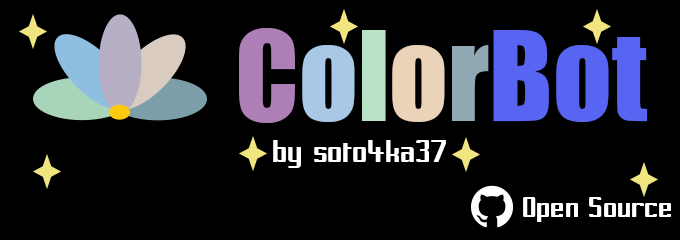
<style>
.page{position:relative;width:680px;height:240px;background:#000000}
.page>*{position:absolute;margin:0}
.t1{font:115.2px "Impact";color:#5865f2}
.t2{font:115.2px "Impact";color:#ae7fb7}
.t3{font:115.2px "Impact";color:#a9c8e8}
.t4{font:115.2px "Impact";color:#b9e3c6}
.t5{font:115.2px "Impact";color:#ead3b8}
.t6{font:115.2px "Impact";color:#8fa8b3}
.t7{font:35.9px "PrussianBrewSolid";color:#ffffff}
.t8{font:33.6px "PrussianBrewSolid";color:#ffffff}
</style>
<div class="page">
<p class="t1" style="left:239px;top:28px;width:409px;height:95px"><span class="t2">C</span><span class="t3">o</span><span class="t4">l</span><span class="t5">o</span><span class="t6">r</span>Bot</p>
<p class="t7" style="left:273px;top:140px;width:173px;height:28px">by soto4ka37</p>
<p class="t8" style="left:523px;top:197px;width:148px;height:25px">Open Source</p>
</div>
